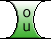
<style>
.page{position:relative;width:51px;height:39px;background:#ffffff}
.page>*{position:absolute;margin:0}
.t1{font:14px "Verdana";color:#000000}
</style>
<div class="page">
<p class="t1" style="left:23px;top:9px;width:8px;height:23px">ou</p>
</div>
